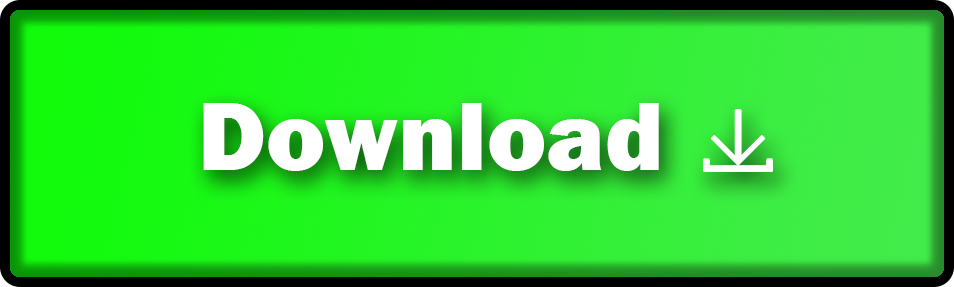
<style>
.page{position:relative;width:954px;height:287px}
.page>*{position:absolute;margin:0}
.t1{font:100px "FranklinGothic-Heavy";color:#ffffff}
</style>
<div class="page">
<p class="t1" style="left:203px;top:103px;width:456px;height:68px">Download</p>
</div>
